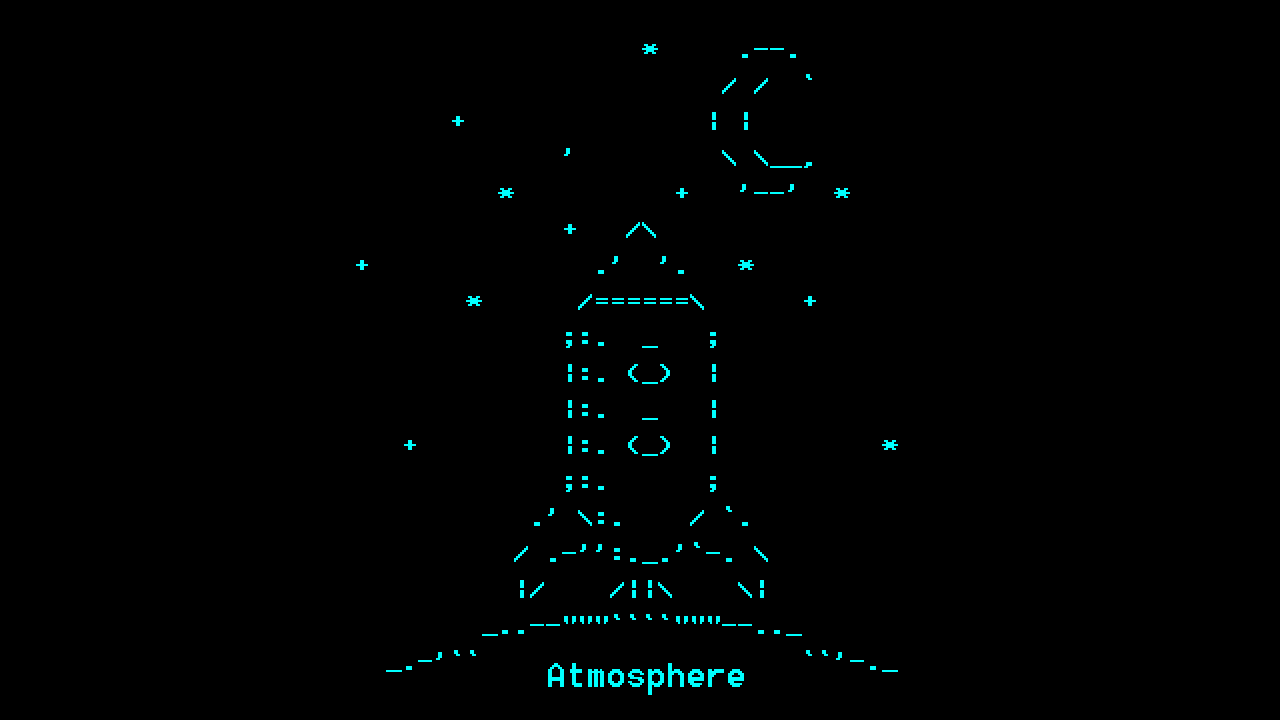
<style>
.page{position:relative;width:1280px;height:720px;background:#000000}
.page>*{position:absolute;margin:0}
.t1{font:30px "Terminal";color:#00ffff}
.t2{font:36px "Terminal";color:#00ffff}
</style>
<div class="page">
<p class="t1" style="left:356px;top:44px;width:542px;height:628px">*     .--.<br>                                           / /  `<br>                          +               | |<br>                                 '         \ \__,<br>                             *          +   '--'  *<br>                                 +   /\<br>                    +              .'  '.   *<br>                           *      /======\      +<br>                                 ;:.  _   ;<br>                                 |:. (_)  |<br>                                 |:.  _   |<br>                       +         |:. (_)  |          *<br>                                 ;:.      ;<br>                               .' \:.    / `.<br>                              / .-'':._.'`-. \<br>                              |/    /||\    \|<br>                            _..--"""````"""--.._<br>                      _.-'``                    ``'-._</p>
<p class="t2" style="left:548px;top:663px;width:196px;height:32px">Atmosphere</p>
</div>
